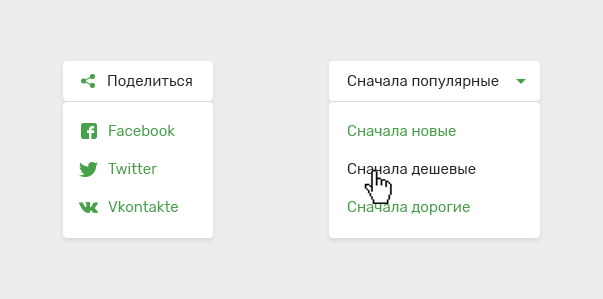
<style>
.page{position:relative;width:603px;height:299px;background:#ededed}
.page>*{position:absolute;margin:0}
.t1{font:15px "Rubik-Regular";color:#272727}
.t2{font:15px/24px "Rubik-Regular";color:#46a148}
.t3{font:15px/24px "Rubik-Regular";color:#272727}
</style>
<div class="page">
<p class="t1" style="left:108px;top:75px;width:84px;height:13px">Поделиться</p>
<p class="t1" style="left:347px;top:75px;width:152px;height:14px">Сначала популярные</p>
<p class="t2" style="left:108px;top:125px;width:70px;height:87px">Facebook<br>Twitter<br>Vkontakte</p>
<p class="t3" style="left:347px;top:125px;width:129px;height:90px"><span class="t2">Cначала новые<br></span>Сначала дешевые<br><span class="t2">Сначала дорогие</span></p>
</div>
